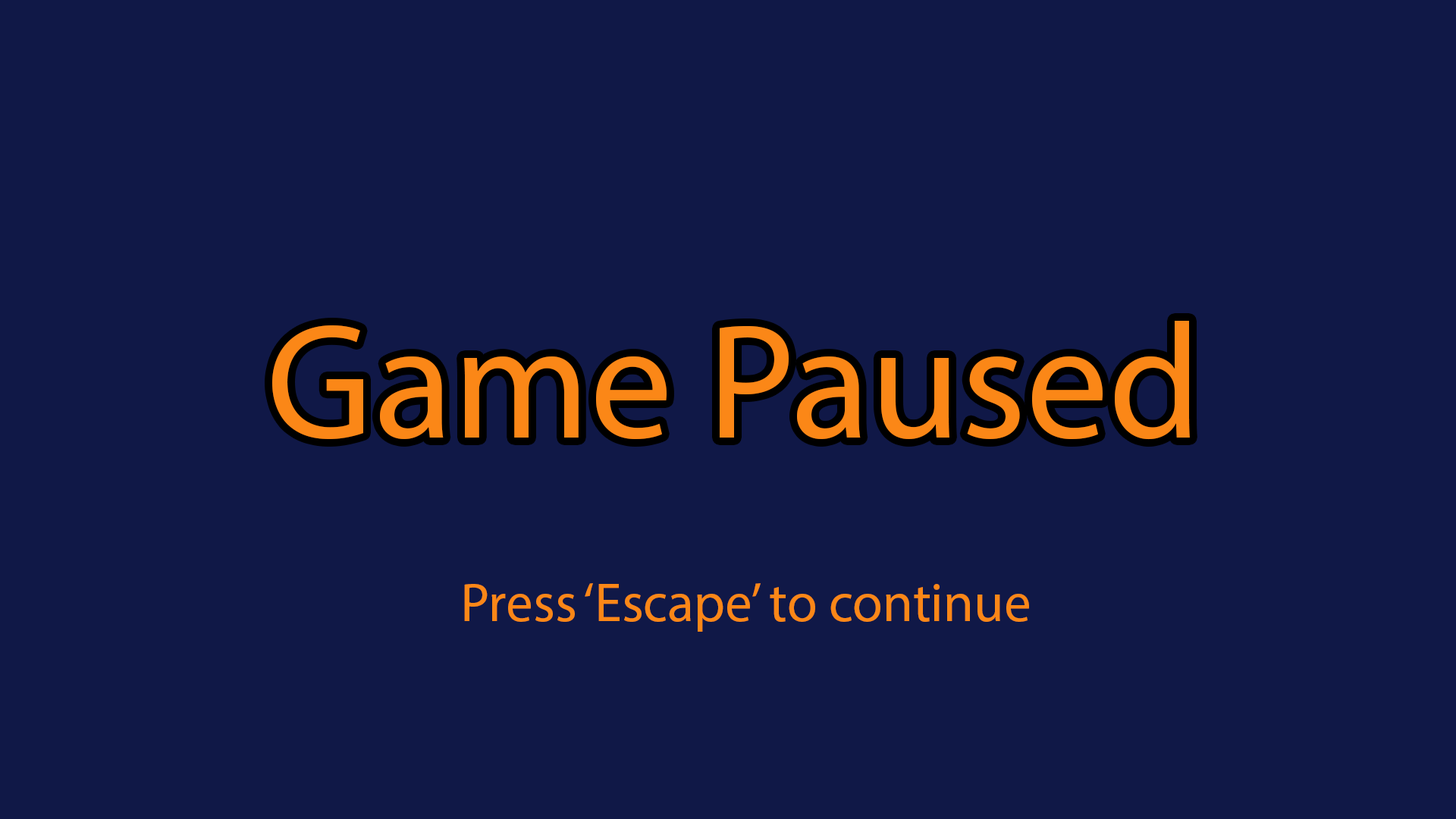
<style>
.page{position:relative;width:1456px;height:819px;background:#101847}
.page>*{position:absolute;margin:0}
.t1{font:164.5px "MyriadPro-Regular";color:#fb8717}
.t2{font:54.6px "MyriadPro-Regular";color:#fb8717}
</style>
<div class="page">
<p class="t1" style="left:272px;top:321px;width:918px;height:119px">Game Paused</p>
<p class="t2" style="left:464px;top:583px;width:565px;height:49px">Press ‘Escape’ to continue</p>
</div>
